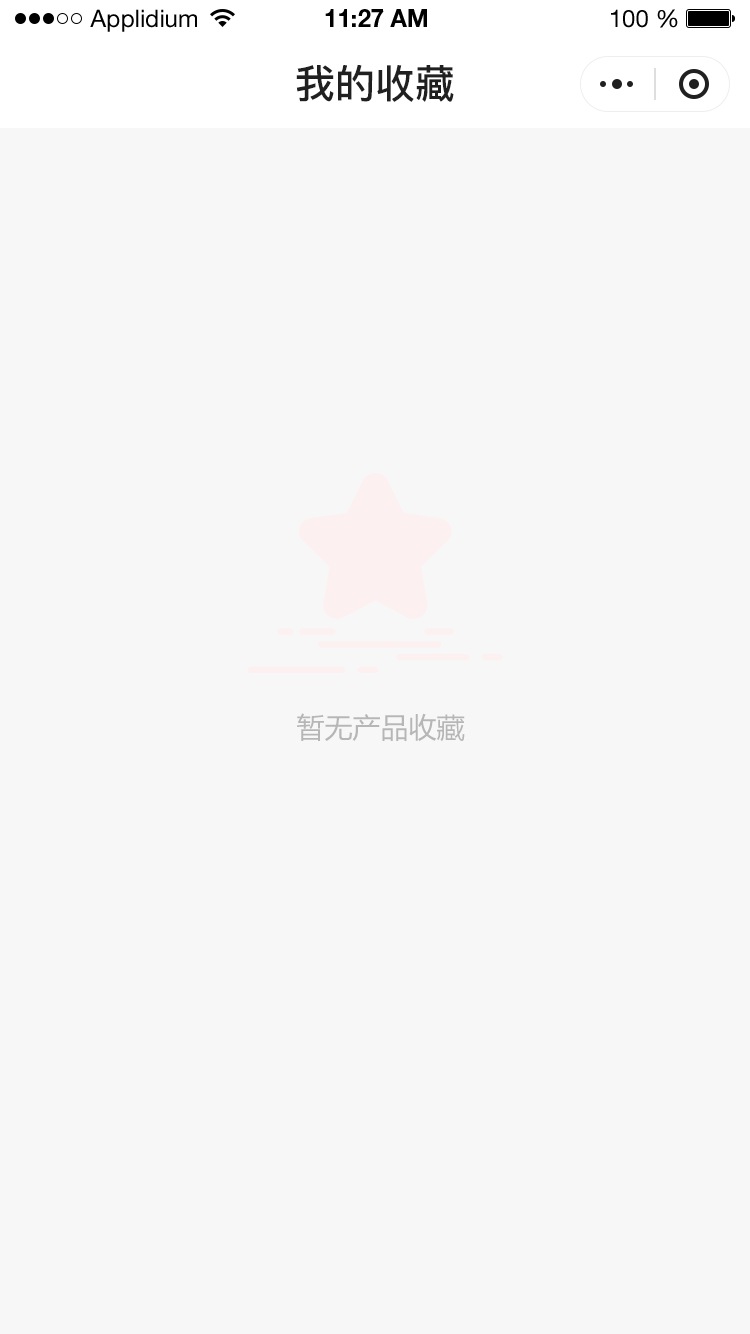
<style>
.page{position:relative;width:750px;height:1334px;background:#f7f7f7}
.page>*{position:absolute;margin:0}
.t1{font:24px "HelveticaNeueLTStd-Roman";color:#000000}
.t2{font:24px "HelveticaNeueLTStd-Bd";color:#000000}
.t3{font:40px "PingFang-SC-Bold";color:#202020;text-transform:uppercase}
.t4{font:28px "MicrosoftYaHei";color:#b6b6b6;text-transform:uppercase}
</style>
<div class="page">
<p class="t1" style="left:90px;top:9px;width:107px;height:23px">Applidium</p>
<p class="t2" style="left:325px;top:9px;width:102px;height:18px">11:27 AM</p>
<p class="t1" style="left:611px;top:9px;width:67px;height:19px">100 %</p>
<p class="t3" style="left:296px;top:64px;width:158px;height:38px">我的收藏</p>
<p class="t4" style="left:297px;top:713px;width:168px;height:29px">暂无产品收藏</p>
</div>
